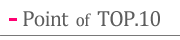
<style>
.page{position:relative;width:180px;height:40px;background:#ffffff}
.page>*{position:absolute;margin:0}
.t1{font:22px "CambriaMath";letter-spacing:-0.04em;color:#5d5d5d}
.t2{font:18px "CambriaMath";letter-spacing:-0.04em;color:#5d5d5d}
</style>
<div class="page">
<p class="t1" style="left:23px;top:11px;width:137px;height:16px">Point  <span class="t2">of</span>  TOP.10</p>
</div>
